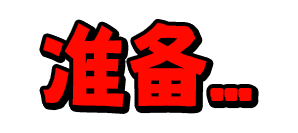
<style>
.page{position:relative;width:298px;height:133px;background:#ffffff}
.page>*{position:absolute;margin:0}
.t1{font:97.3px "HouseofTerror";letter-spacing:-0.04em;color:#ff0900;text-transform:uppercase}
.t2{font:97.3px "NishikitekiBold-Regular";letter-spacing:-0.04em;color:#ff0900;text-transform:uppercase}
</style>
<div class="page">
<p class="t1" style="left:43px;top:22px;width:209px;height:85px"><span class="t2">准备</span>...</p>
</div>
